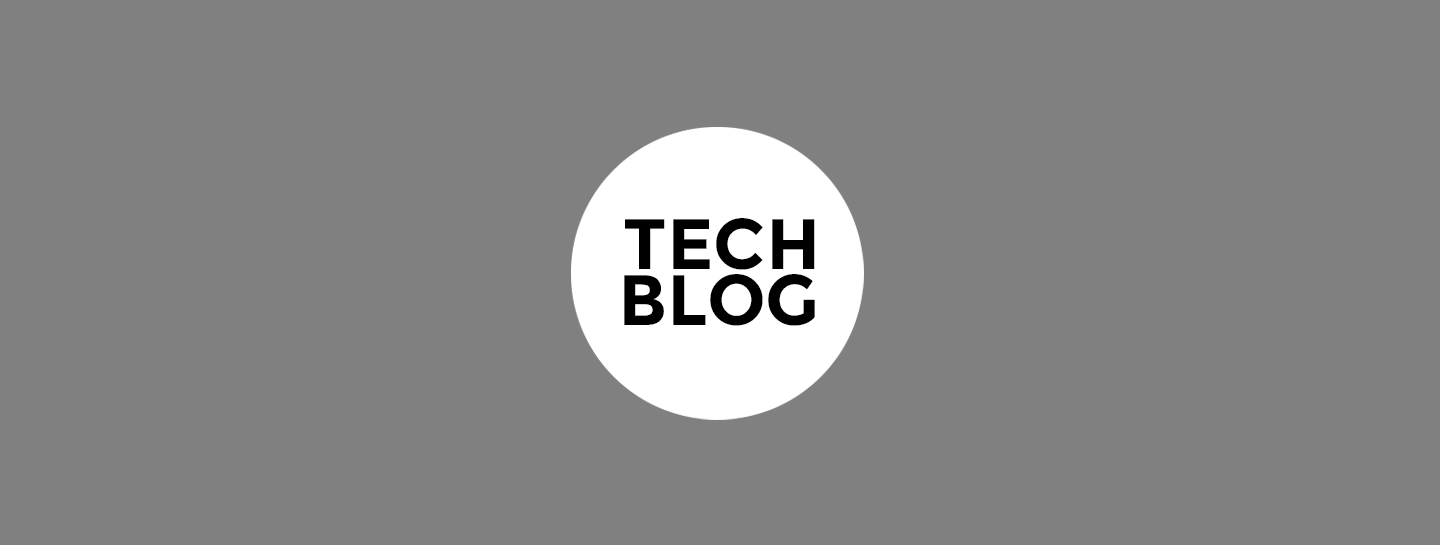
<style>
.page{position:relative;width:1440px;height:545px;background:#808080}
.page>*{position:absolute;margin:0}
.t1{font:71.2px "Montserrat-Bold";color:#000000}
</style>
<div class="page">
<p class="t1" style="left:625px;top:218px;width:190px;height:52px">TECH</p>
<p class="t1" style="left:624px;top:274px;width:191px;height:52px">BLOG</p>
</div>
